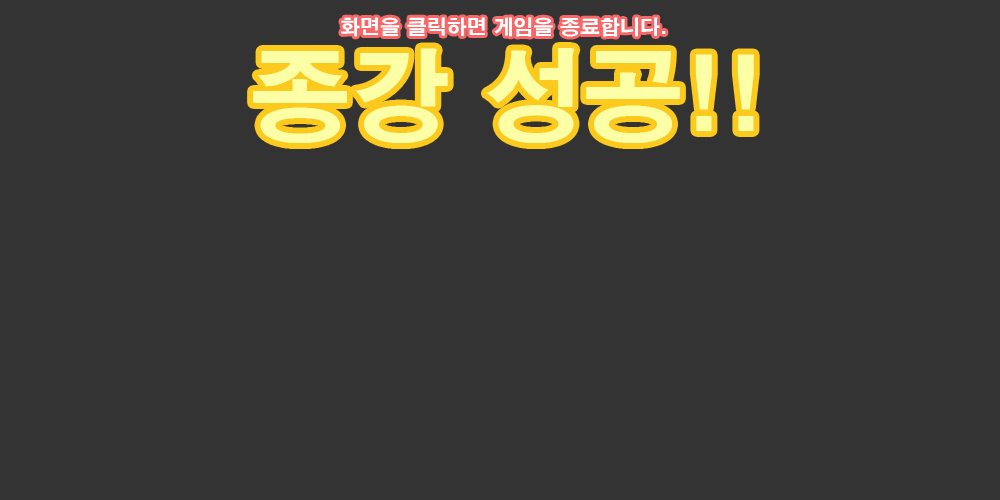
<style>
.page{position:relative;width:1000px;height:500px;background:#333333}
.page>*{position:absolute;margin:0}
.t1{font:20px "H2gtrE";color:#ffffff}
.t2{font:100px "H2gtrE";color:#fcffa6}
</style>
<div class="page">
<p class="t1" style="left:341px;top:17px;width:325px;height:20px">화면을 클릭하면 게임을 종료합니다.</p>
<p class="t2" style="left:253px;top:48px;width:501px;height:95px">종강 성공!!</p>
</div>
